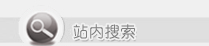
<style>
.page{position:relative;width:209px;height:46px;background:#f0f0f0}
.page>*{position:absolute;margin:0}
.t1{font:15.3px "YouYuan";letter-spacing:0.05em;color:#7f7f7f}
</style>
<div class="page">
<p class="t1" style="left:73px;top:24px;width:62px;height:15px">站内搜索</p>
</div>
